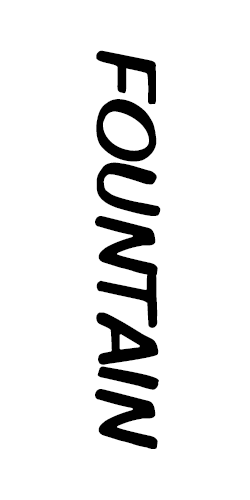
<style>
.page{position:relative;width:250px;height:500px;background:#ffffff}
.page>*{position:absolute;margin:0}
.t1{font:85.5px "KomikaDisplay";color:#000000}
</style>
<div class="page">
<p class="t1" style="left:95px;top:50px;width:66px;height:399px;rotate:90deg">FOUNTAIN</p>
</div>
